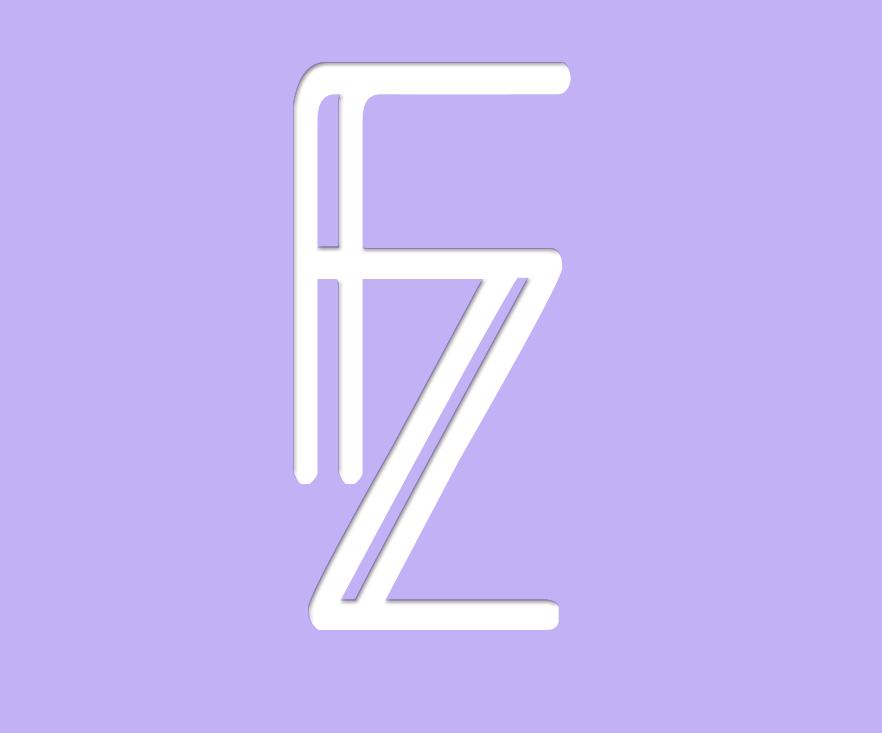
<style>
.page{position:relative;width:882px;height:733px;background:#c3b1f6}
.page>*{position:absolute;margin:0}
.t1{font:600.9px "Lucca-Regular";color:#ffffff;scale:0.69 1}
.t2{font:543.9px "Lucca-Regular";color:#ffffff;scale:0.74 1}
</style>
<div class="page">
<p class="t1" style="left:294px;top:63px;width:227px;height:421px">F</p>
<p class="t2" style="left:309px;top:249px;width:254px;height:381px">z</p>
</div>
